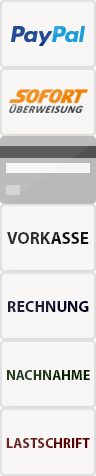
<style>
.page{position:relative;width:96px;height:476px;background:#f8f7f5}
.page>*{position:absolute;margin:0}
.t1{font:17px "MyriadPro-Bold";text-transform:uppercase}
.t2{font:16px "MyriadPro-Bold";text-transform:uppercase}
.t3{font:14px "MyriadPro-Bold";text-transform:uppercase}
</style>
<div class="page">
<p class="t1" style="left:7px;top:232px;width:82px;height:12px">VoRKASSE</p>
<p class="t1" style="left:7px;top:232px;width:82px;height:12px">VoRKASSE</p>
<p class="t2" style="left:8px;top:301px;width:81px;height:11px">RECHNUNG</p>
<p class="t3" style="left:7px;top:370px;width:83px;height:10px">NACHNAHME</p>
<p class="t3" style="left:6px;top:438px;width:84px;height:10px">LASTSCHRIFT</p>
</div>
